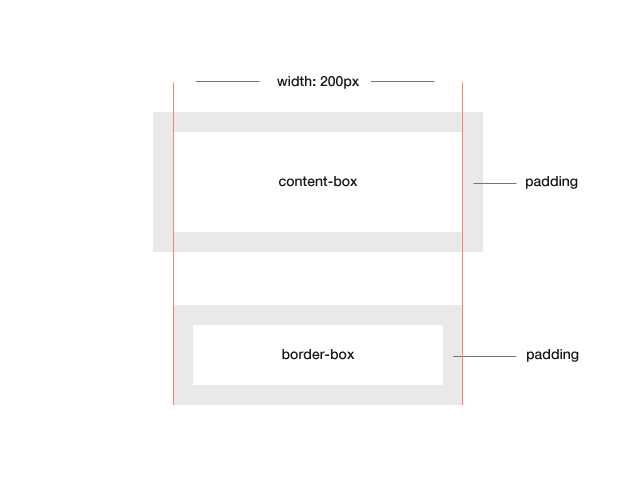
<style>
.page{position:relative;width:640px;height:480px;background:#ffffff}
.page>*{position:absolute;margin:0}
.t1{font:14px "HelveticaNeue-Medium";color:#171717}
</style>
<div class="page">
<p class="t1" style="left:277px;top:76px;width:83px;height:13px">width: 200px</p>
<p class="t1" style="left:279px;top:176px;width:79px;height:11px">content-box</p>
<p class="t1" style="left:526px;top:176px;width:52px;height:13px">padding</p>
<p class="t1" style="left:282px;top:349px;width:73px;height:11px">border-box</p>
<p class="t1" style="left:527px;top:349px;width:52px;height:13px">padding</p>
</div>
